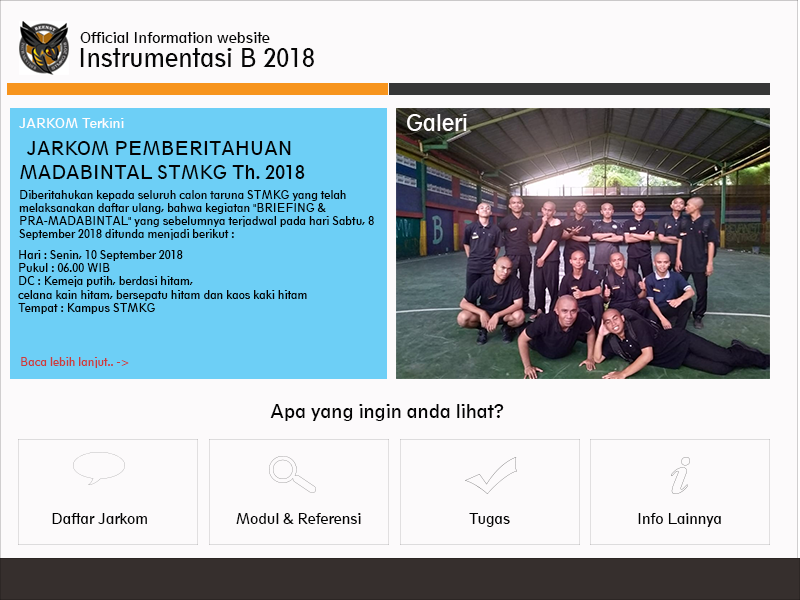
<style>
.page{position:relative;width:800px;height:600px;background:#fcfafb}
.page>*{position:absolute;margin:0}
.t1{font:14.2px "Geometric212BT-BookCondensed";color:#070707}
.t2{font:24px "Geometric212BT-BookCondensed";color:#070707}
.t3{font:12.5px "Geometric212BT-BookCondensed";color:#fffdfd;scale:1.05 1}
.t4{font:21.4px "Geometric212BT-BookCondensed";color:#fffdfd}
.t5{font:18px/24px "Geometric212BT-BookCondensed";color:#030303}
.t6{font:11px "Geometric212BT-BookCondensed";color:#030303}
.t7{font:11px "Geometric212BT-BookCondensed";color:#c83d3d}
.t8{font:17.8px "Geometric212BT-BookCondensed";color:#030303;scale:1.03 1}
.t9{font:14.2px "Geometric212BT-BookCondensed";color:#030303}
</style>
<div class="page">
<p class="t1" style="left:80px;top:32px;width:190px;height:11px">Official Information website</p>
<p class="t2" style="left:80px;top:48px;width:234px;height:19px">Instrumentasi B 2018</p>
<p class="t3" style="left:19px;top:118px;width:105px;height:10px">JARKOM Terkini</p>
<p class="t4" style="left:407px;top:114px;width:60px;height:17px">Galeri</p>
<p class="t5" style="left:20px;top:141px;width:285px;height:38px;text-align:center">JARKOM PEMBERITAHUAN <br>MADABINTAL STMKG Th. 2018</p>
<p class="t6" style="left:19px;top:190px;width:355px;height:50px">Diberitahukan kepada seluruh calon taruna STMKG yang telah melaksanakan daftar ulang, bahwa kegiatan "BRIEFING &amp; PRA-MADABINTAL" yang sebelumnya terjadwal pada hari Sabtu, 8 September 2018 ditunda menjadi berikut :</p>
<p class="t6" style="left:18px;top:250px;width:289px;height:64px">Hari : Senin, 10 September 2018<br>Pukul : 06.00 WIB<br>DC : Kemeja putih, berdasi hitam, <br>celana kain hitam, bersepatu hitam dan kaos kaki hitam<br>Tempat : Kampus STMKG</p>
<p class="t7" style="left:21px;top:357px;width:108px;height:11px">Baca lebih lanjut.. -&gt;</p>
<p class="t8" style="left:270px;top:404px;width:234px;height:17px">Apa yang ingin anda lihat?</p>
<p class="t9" style="left:52px;top:513px;width:95px;height:11px">Daftar Jarkom</p>
<p class="t9" style="left:236px;top:513px;width:125px;height:11px">Modul &amp; Referensi</p>
<p class="t9" style="left:469px;top:513px;width:41px;height:14px">Tugas</p>
<p class="t9" style="left:638px;top:513px;width:83px;height:14px">Info Lainnya</p>
</div>
